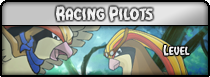
<style>
.page{position:relative;width:210px;height:77px}
.page>*{position:absolute;margin:0}
.t1{font:15.5px "VampireBride";color:#eeeeee}
.t2{font:16.9px "VampireBride";color:#eeeeee}
</style>
<div class="page">
<p class="t1" style="left:56px;top:6px;width:97px;height:16px"><span class="t2">R</span>acing <span class="t2">P</span>ilots</p>
</div>
